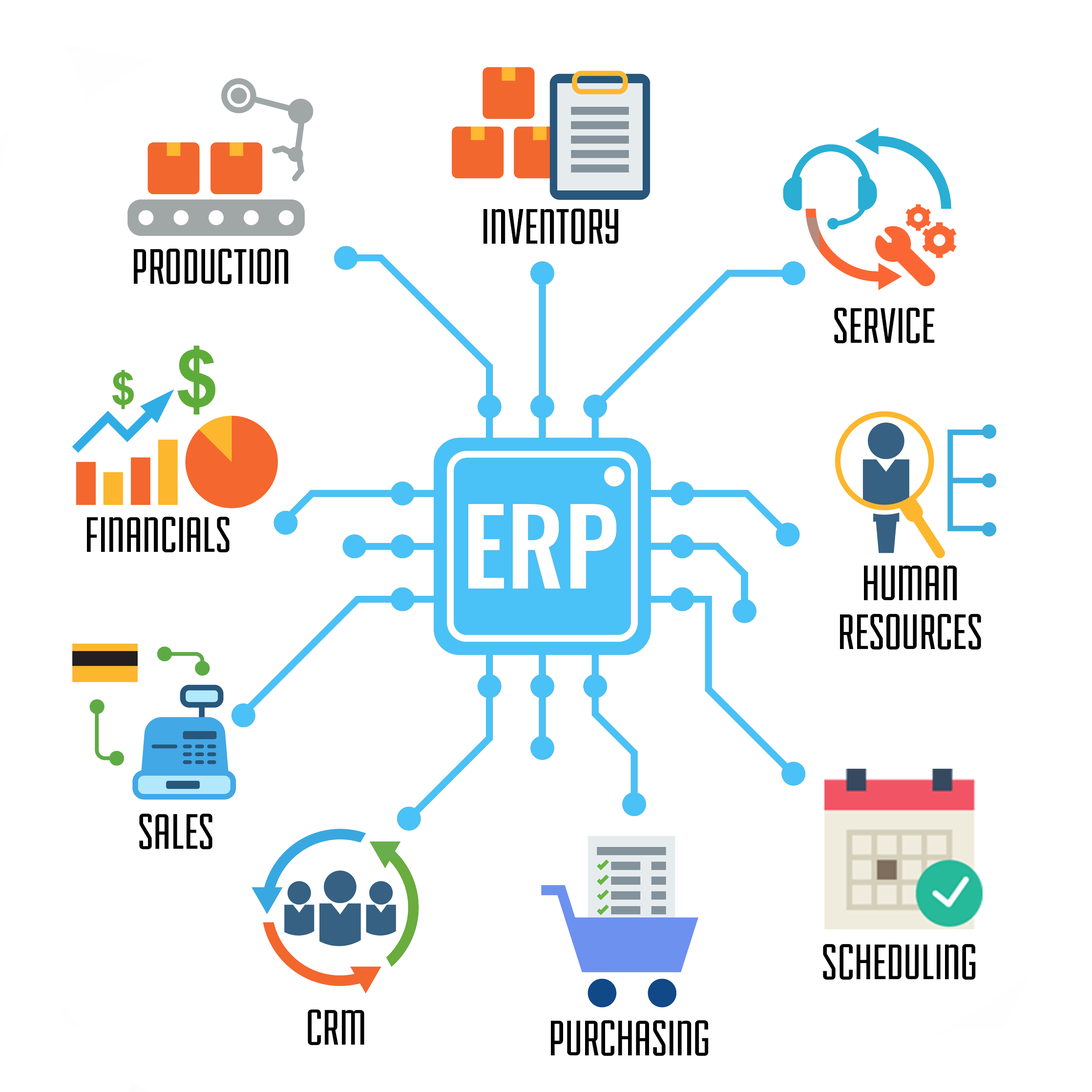
<style>
.page{position:relative;width:1092px;height:1092px;background:#ffffff}
.page>*{position:absolute;margin:0}
.t1{font:52.9px "Fairview-Regular";color:#000000}
.t2{font:52.9px/48.8px "Fairview-Regular";color:#000000}
</style>
<div class="page">
<p class="t1" style="left:483px;top:209px;width:135px;height:35px">INVENTORY</p>
<p class="t1" style="left:134px;top:249px;width:155px;height:35px">PRODUCTION</p>
<p class="t1" style="left:834px;top:308px;width:101px;height:35px">SERVICE</p>
<p class="t1" style="left:87px;top:517px;width:143px;height:35px">FINANCIALS</p>
<p class="t2" style="left:840px;top:566px;width:141px;height:84px;text-align:center">HUMAN<br>RESOURCES</p>
<p class="t1" style="left:139px;top:814px;width:73px;height:35px">SALES</p>
<p class="t1" style="left:823px;top:944px;width:153px;height:36px">SCHEDULING</p>
<p class="t1" style="left:308px;top:1009px;width:56px;height:36px">CRM</p>
<p class="t1" style="left:551px;top:1020px;width:158px;height:36px">PURCHASING</p>
</div>
